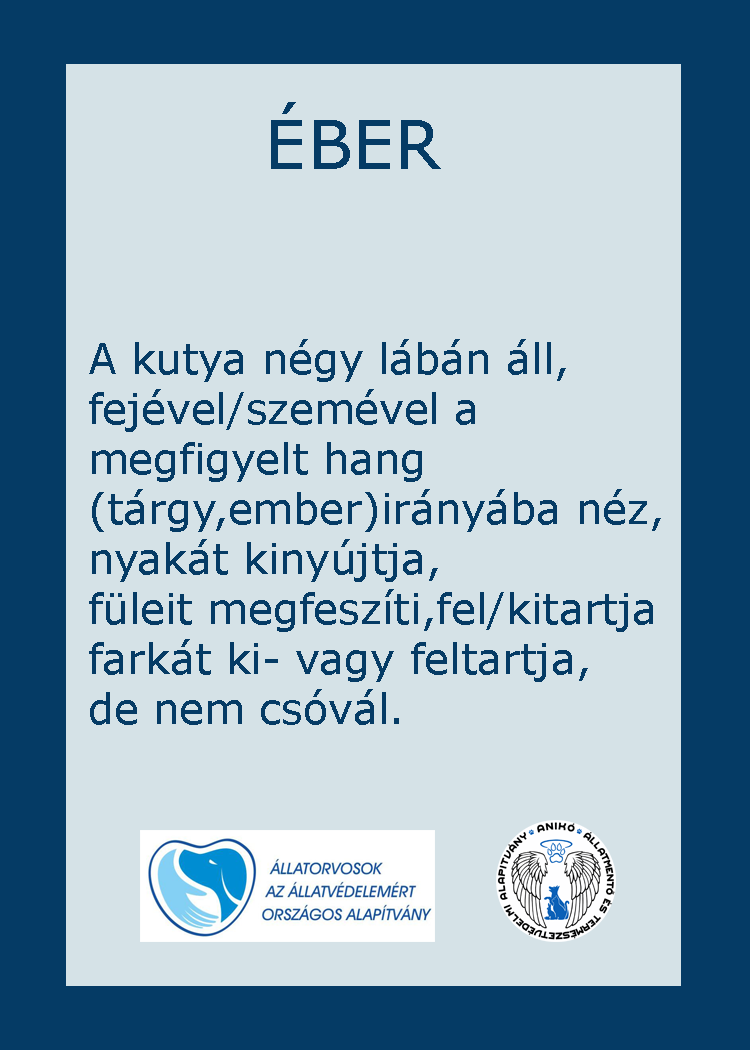
<style>
.page{position:relative;width:750px;height:1050px;background:#d5e2e7}
.page>*{position:absolute;margin:0}
.t1{font:66.7px "Verdana";color:#053b65}
.t2{font:66.7px "GravitateBRK";color:#053b65}
.t3{font:41.7px "Verdana";color:#053b65}
</style>
<div class="page">
<p class="t1" style="left:271px;top:102px;width:170px;height:67px"><span class="t2">        </span>ÉBER</p>
<p class="t3" style="left:89px;top:339px;width:572px;height:386px">A kutya négy lábán áll,<br>fejével/szemével a <br>megfigyelt hang<br>(tárgy,ember)irányába néz,<br>nyakát kinyújtja,<br>füleit megfeszíti,fel/kitartja<br>farkát ki- vagy feltartja,<br>de nem csóvál.</p>
</div>
